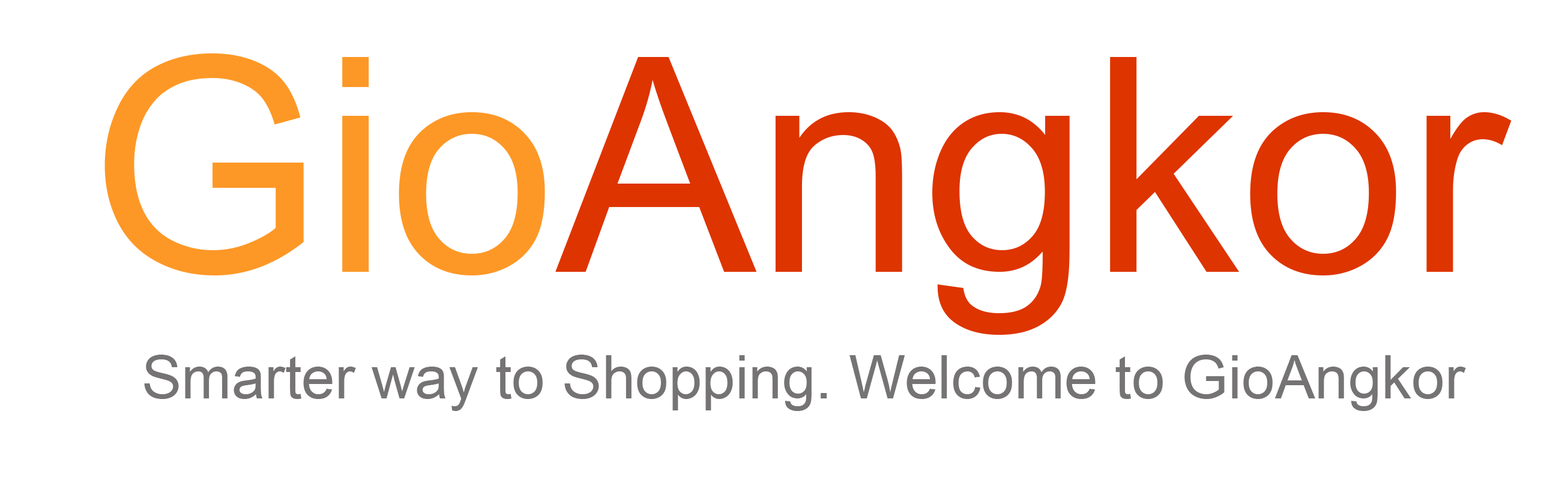
<style>
.page{position:relative;width:1568px;height:480px;background:#ffffff}
.page>*{position:absolute;margin:0}
.t1{font:300.2px "ArialMT";color:#de3400}
.t2{font:300.2px "ArialMT";color:#fd9826}
.t3{font:60px "ArialMT";color:#757373}
</style>
<div class="page">
<p class="t1" style="left:104px;top:53px;width:1408px;height:282px"><span class="t2">Gio</span>Angkor</p>
<p class="t3" style="left:144px;top:355px;width:1322px;height:56px">Smarter way to Shopping. Welcome to GioAngkor</p>
</div>
